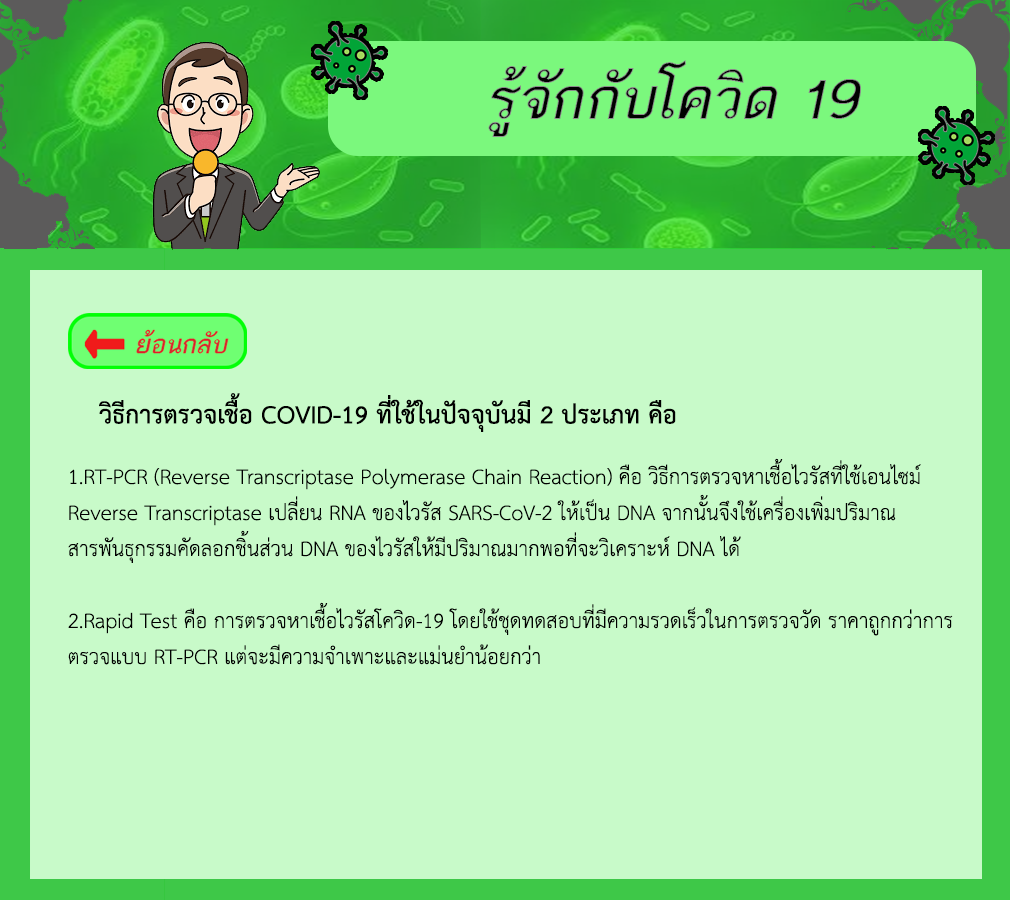
<style>
.page{position:relative;width:1010px;height:900px;background:#c8fac9}
.page>*{position:absolute;margin:0}
.t1{font:36px "THSarabunPSK-Bold";color:#000000}
.t2{font:30px "THSarabunPSK";color:#000000}
</style>
<div class="page">
<p class="t1" style="left:99px;top:393px;width:577px;height:39px">วิธีการตรวจเชื้อ COVID-19 ที่ใช้ในปัจจุบันมี 2 ประเภท คือ</p>
<p class="t2" style="left:68px;top:458px;width:885px;height:207px">1.RT-PCR (Reverse Transcriptase Polymerase Chain Reaction) คือ วิธีการตรวจหาเชื้อไวรัสที่ใช้เอนไซม์<br>Reverse Transcriptase เปลี่ยน RNA ของไวรัส SARS-CoV-2 ให้เป็น DNA จากนั้นจึงใช้เครื่องเพิ่มปริมาณ<br>สารพันธุกรรมคัดลอกชิ้นส่วน DNA ของไวรัสให้มีปริมาณมากพอที่จะวิเคราะห์ DNA ได้<br><br>2.Rapid Test คือ การตรวจหาเชื้อไวรัสโควิด-19 โดยใช้ชุดทดสอบที่มีความรวดเร็วในการตรวจวัด ราคาถูกกว่าการ<br>ตรวจแบบ RT-PCR แต่จะมีความจำเพาะและแม่นยำน้อยกว่า</p>
</div>
